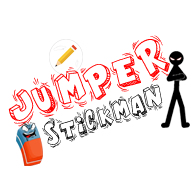
<style>
.page{position:relative;width:192px;height:192px;background:#ffffff}
.page>*{position:absolute;margin:0}
.t1{font:23.8px "GoodMorning";color:#ff0000}
.t2{font:14.9px "GoodMorning";color:#000000}
</style>
<div class="page">
<p class="t1" style="left:8px;top:35px;width:163px;height:92px;rotate:-20deg">JUMPER</p>
<p class="t2" style="left:42px;top:84px;width:121px;height:64px;rotate:-18deg">STICKMAN</p>
</div>
